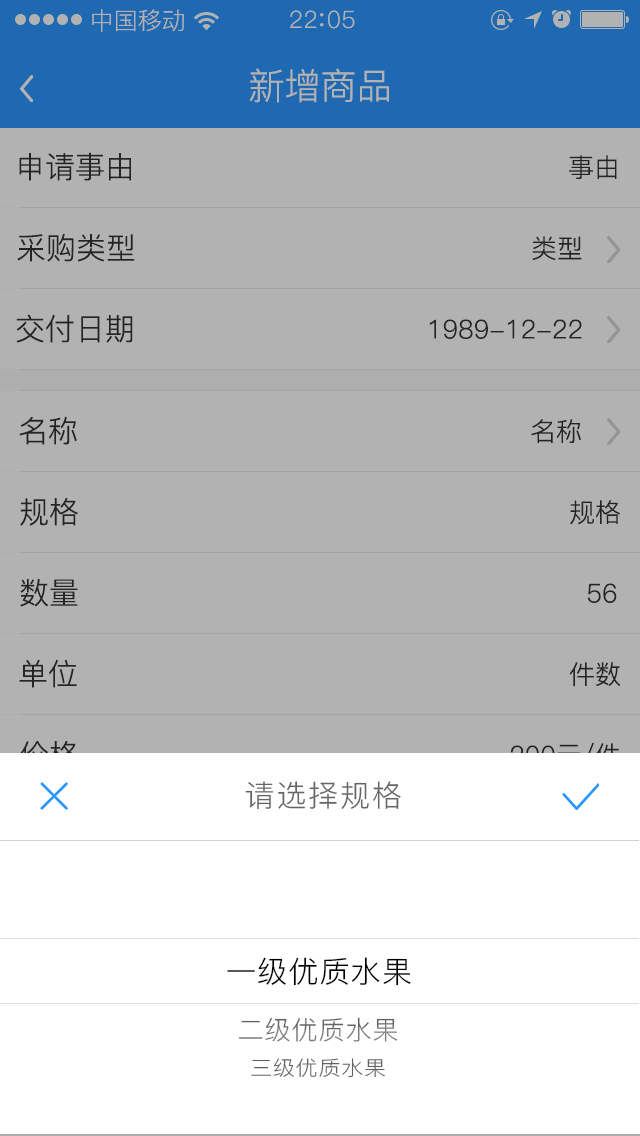
<style>
.page{position:relative;width:640px;height:1136px;background:#b2b2b2}
.page>*{position:absolute;margin:0}
.t1{font:24px "PingFang-SC-Regular";color:#b2b2b2}
.t2{font:24px "PingFang-SC-Regular";letter-spacing:0.03em;color:#b2b2b2}
.t3{font:36px "PingFang-SC-Regular";color:#b2b2b2}
.t4{font:30px "PingFang-SC-Regular";color:#333333}
.t5{font:26px "PingFang-SC-Regular";color:#333333}
.t6{font:30px "PingFang-SC-Regular"}
.t7{font:30px "PingFang-SC-Regular";letter-spacing:0.06em;color:#666666}
.t8{font:29.9px "PingFang-SC-Regular";letter-spacing:0.03em;color:#000000}
.t9{font:26px "PingFang-SC-Regular";letter-spacing:0.03em}
.t10{font:20.4px "PingFang-SC-Regular";letter-spacing:0.03em;color:#626262;scale:1.08 1}
</style>
<div class="page">
<p class="t1" style="left:92px;top:9px;width:92px;height:23px">中国移动</p>
<p class="t2" style="left:290px;top:10px;width:65px;height:19px">22 05</p>
<p class="t3" style="left:249px;top:68px;width:140px;height:35px">新增商品</p>
<p class="t4" style="left:19px;top:152px;width:112px;height:29px">申请事由</p>
<p class="t5" style="left:569px;top:155px;width:48px;height:24px">事由</p>
<p class="t4" style="left:17px;top:233px;width:118px;height:29px">采购类型</p>
<p class="t5" style="left:532px;top:236px;width:50px;height:24px">类型</p>
<p class="t4" style="left:16px;top:314px;width:117px;height:29px">交付日期</p>
<p class="t5" style="left:429px;top:319px;width:153px;height:20px">1989-12-22</p>
<p class="t4" style="left:19px;top:416px;width:58px;height:29px">名称</p>
<p class="t5" style="left:531px;top:419px;width:50px;height:24px">名称</p>
<p class="t4" style="left:20px;top:497px;width:58px;height:29px">规格</p>
<p class="t5" style="left:570px;top:500px;width:50px;height:25px">规格</p>
<p class="t4" style="left:20px;top:578px;width:58px;height:29px">数量</p>
<p class="t5" style="left:587px;top:583px;width:30px;height:20px">56</p>
<p class="t4" style="left:19px;top:659px;width:58px;height:29px">单位</p>
<p class="t5" style="left:569px;top:662px;width:52px;height:25px">件数</p>
<p class="t6" style="left:20px;top:740px;width:58px;height:29px">价格</p>
<p class="t7" style="left:245px;top:781px;width:156px;height:28px">请选择规格</p>
<p class="t8" style="left:227px;top:957px;width:184px;height:29px">一级优质水果</p>
<p class="t9" style="left:239px;top:1017px;width:159px;height:25px">二级优质水果</p>
<p class="t10" style="left:251px;top:1058px;width:134px;height:20px">三级优质水果</p>
</div>
